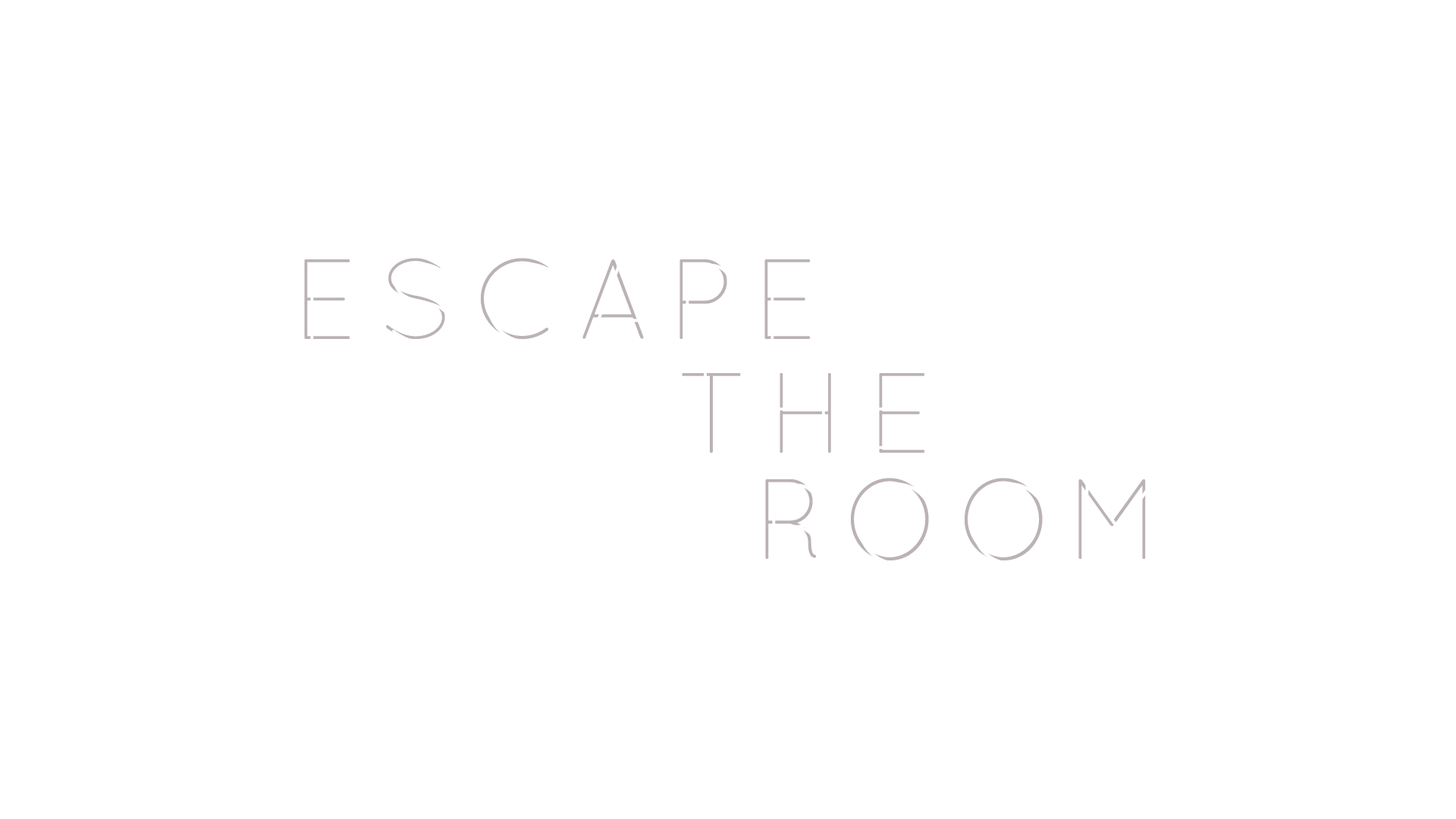
<style>
.page{position:relative;width:1456px;height:819px;background:#ffffff}
.page>*{position:absolute;margin:0}
.t1{font:113.7px "QuicksandLight-Regular";letter-spacing:0.16em;color:#bbb3b3}
</style>
<div class="page">
<p class="t1" style="left:304px;top:258px;width:507px;height:82px">ESCAPE</p>
<p class="t1" style="left:682px;top:373px;width:243px;height:80px">THE</p>
<p class="t1" style="left:765px;top:478px;width:381px;height:82px">ROOM</p>
</div>
